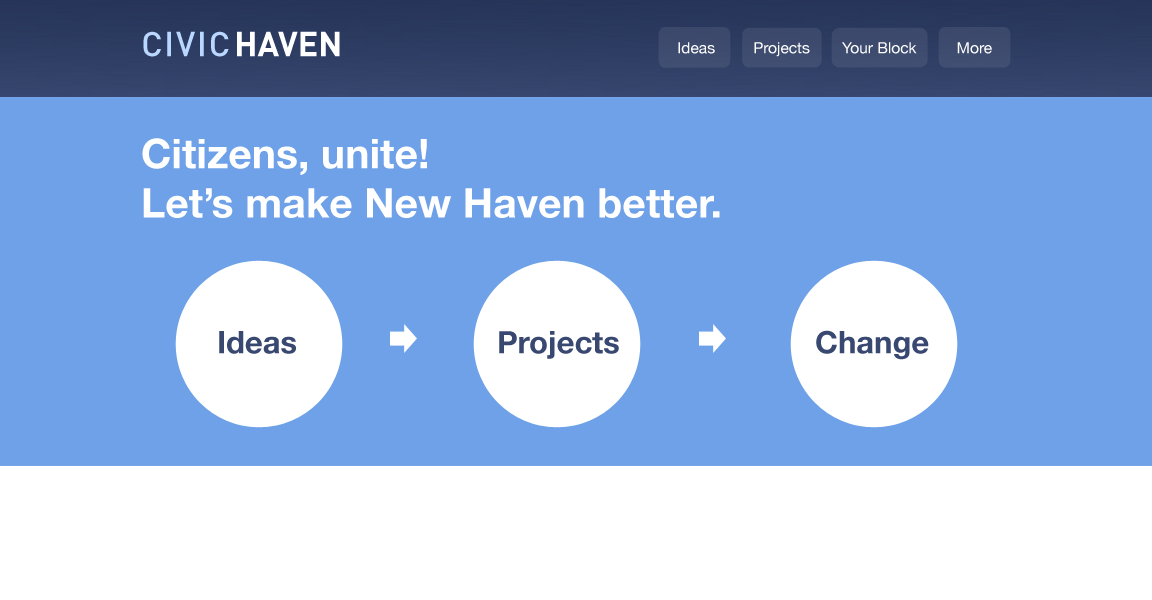
<style>
.page{position:relative;width:1152px;height:600px;background:#6ea1e7}
.page>*{position:absolute;margin:0}
.t1{font:34px "DIN-Medium";letter-spacing:0.05em;color:#b9d7ff}
.t2{font:34px "DIN-Bold";color:#ffffff}
.t3{font:15.5px "HelveticaNeue";color:#fefefe}
.t4{font:41px "HelveticaNeue-Bold";color:#ffffff}
.t5{font:31px "HelveticaNeue-Bold";color:#384870}
</style>
<div class="page">
<p class="t1" style="left:143px;top:31px;width:197px;height:26px">CIVIC <span class="t2">HAVEN</span></p>
<p class="t3" style="left:678px;top:42px;width:37px;height:12px">Ideas</p>
<p class="t3" style="left:754px;top:42px;width:56px;height:15px">Projects</p>
<p class="t3" style="left:842px;top:42px;width:75px;height:12px">Your Block</p>
<p class="t3" style="left:957px;top:42px;width:35px;height:12px">More</p>
<p class="t4" style="left:142px;top:138px;width:578px;height:80px">Citizens, unite!<br>Let’s make New Haven better.</p>
<p class="t5" style="left:219px;top:331px;width:77px;height:23px">Ideas</p>
<p class="t5" style="left:499px;top:331px;width:120px;height:28px">Projects</p>
<p class="t5" style="left:816px;top:330px;width:113px;height:30px">Change</p>
</div>
